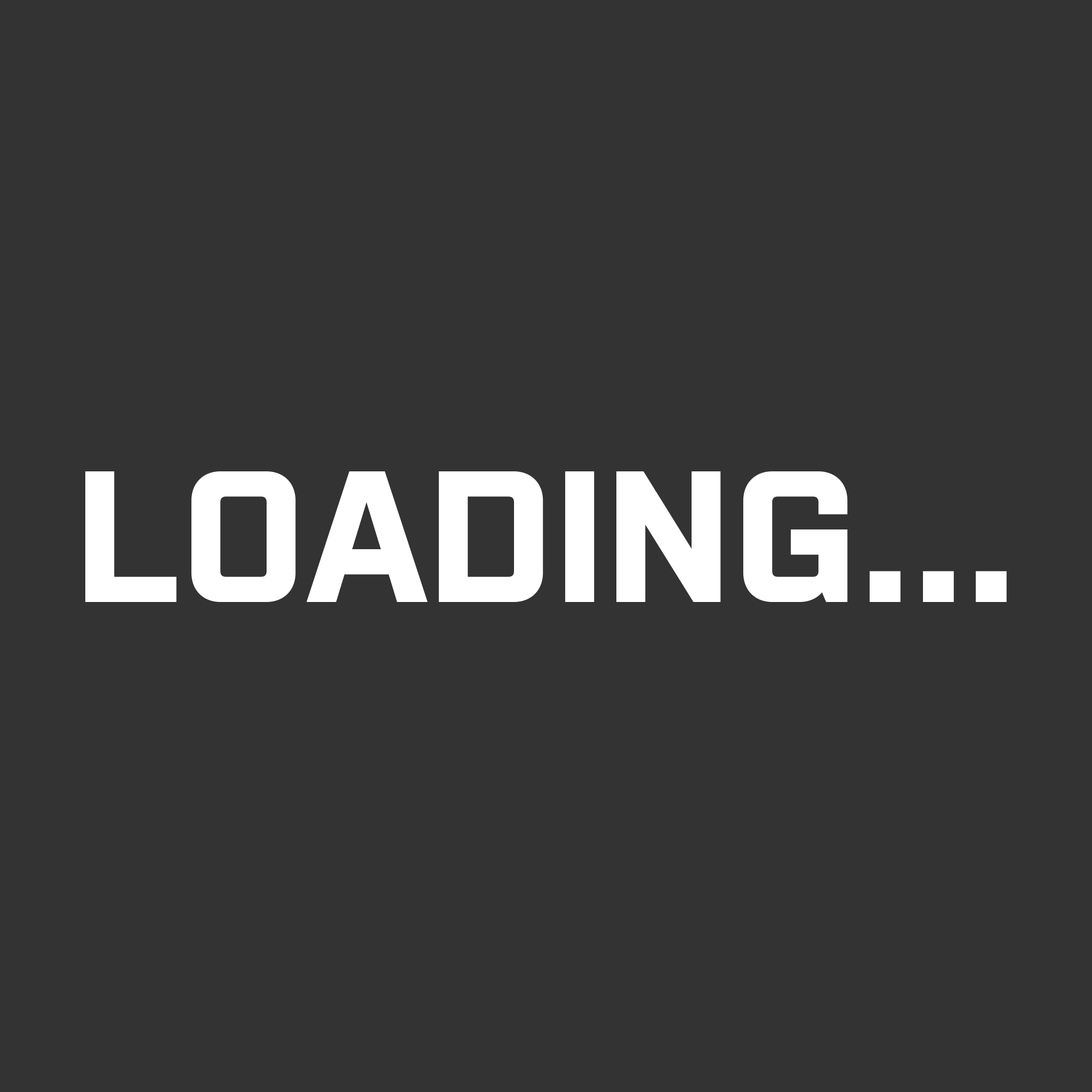
<style>
.page{position:relative;width:1092px;height:1092px;background:#333333}
.page>*{position:absolute;margin:0}
.t1{font:186.6px "Purista-Bold";color:#ffffff}
</style>
<div class="page">
<p class="t1" style="left:85px;top:471px;width:922px;height:131px">LOADING...</p>
</div>
